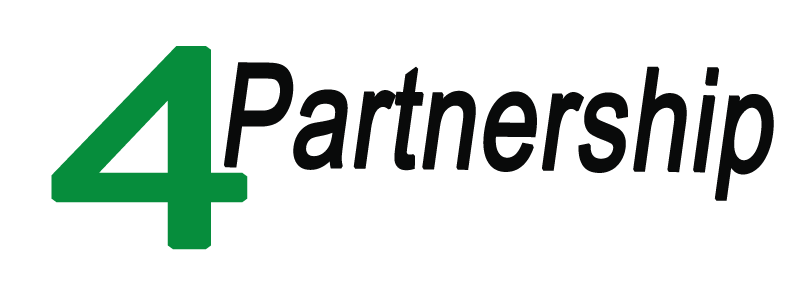
<style>
.page{position:relative;width:800px;height:300px;background:#ffffff}
.page>*{position:absolute;margin:0}
.t1{font:273.1px "ArialMT";color:#068d3c;font-weight:bold;scale:1.37 1}
.t2{font:141.3px "ArialMT";color:#090a0a;font-weight:bold;font-style:italic;scale:0.72 1}
</style>
<div class="page">
<p class="t1" style="left:51px;top:46px;width:197px;height:204px">4</p>
<p class="t2" style="left:224px;top:62px;width:550px;height:139px;rotate:1deg">Partnership</p>
</div>
